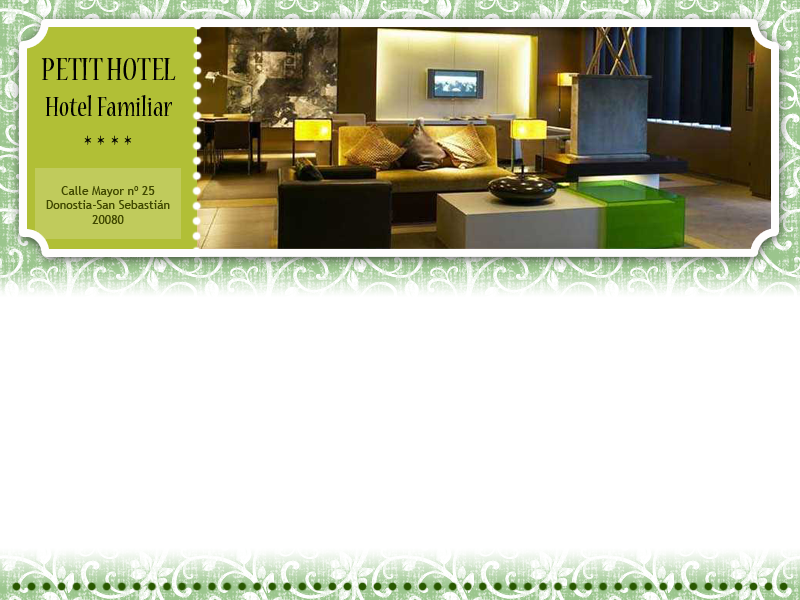
<style>
.page{position:relative;width:800px;height:600px;background:#ffffff}
.page>*{position:absolute;margin:0}
.t1{font:30px "NuevaStd-Cond";color:#000000}
.t2{font:35px "NuevaStd-Cond";color:#000000}
.t3{font:40px "NuevaStd-Cond";color:#000000}
.t4{font:12px "TrebuchetMS";color:#404800}
</style>
<div class="page">
<p class="t1" style="left:41px;top:58px;width:135px;height:87px;text-align:center"><span class="t2">PETIT HOTEL<br></span>Hotel Familiar<br><span class="t3">* * * *</span></p>
<p class="t4" style="left:46px;top:186px;width:124px;height:38px;text-align:center">Calle Mayor nº 25<br>Donostia-San Sebastián<br>20080</p>
</div>
